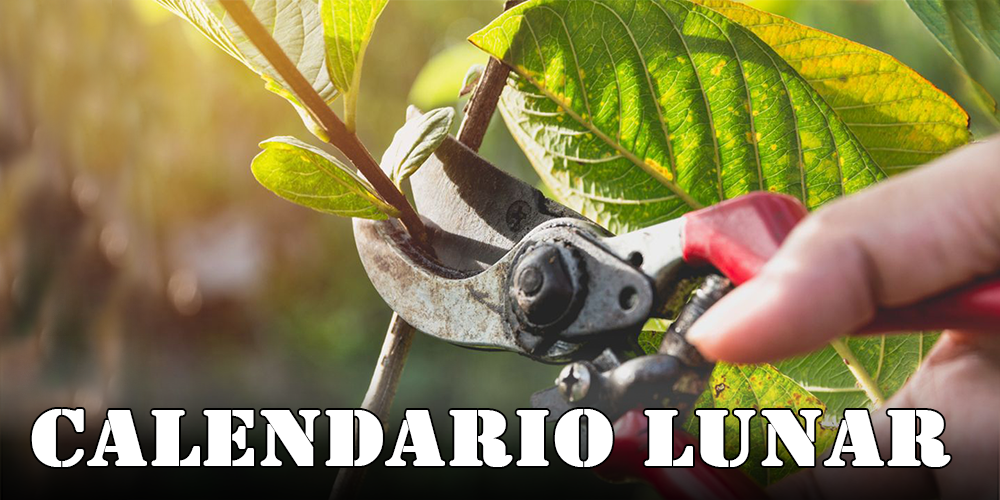
<style>
.page{position:relative;width:1000px;height:500px}
.page>*{position:absolute;margin:0}
.t1{font:83.3px "Stencil";color:#ffffff;font-weight:bold;scale:1.12 1}
</style>
<div class="page">
<p class="t1" style="left:31px;top:409px;width:920px;height:58px">Calendario LUNAR</p>
</div>
